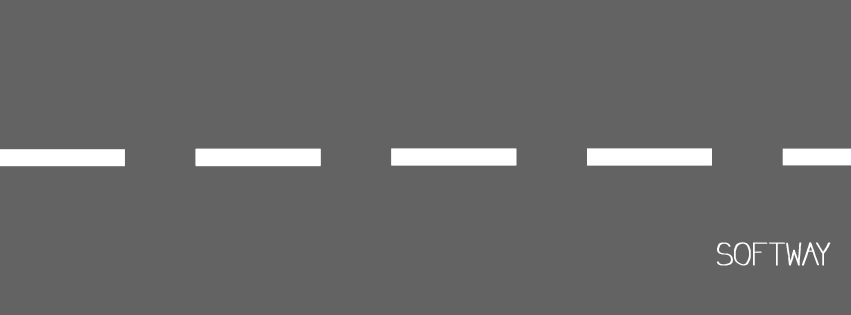
<style>
.page{position:relative;width:851px;height:315px;background:#636363}
.page>*{position:absolute;margin:0}
.t1{font:32.2px "Frenchy";color:#ffffff;font-weight:bold;scale:1.1 1}
</style>
<div class="page">
<p class="t1" style="left:717px;top:242px;width:114px;height:24px">SOFTWAY</p>
</div>
